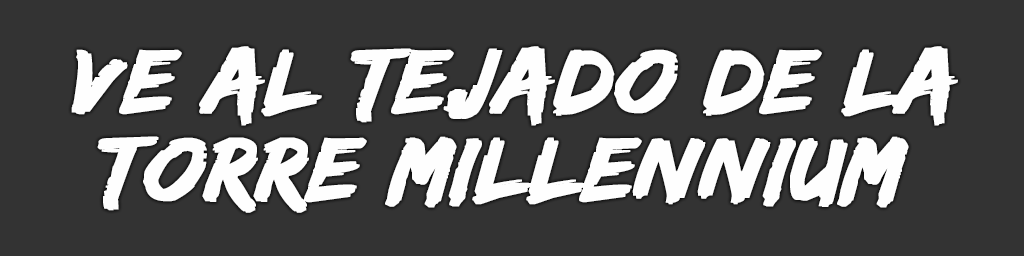
<style>
.page{position:relative;width:1024px;height:256px;background:#333333}
.page>*{position:absolute;margin:0}
.t1{font:94px/88px "EdoSZ";color:#fefefe;font-weight:bold;font-style:italic;scale:1.04 1}
</style>
<div class="page">
<p class="t1" style="left:71px;top:46px;width:887px;height:167px;text-align:center">ve aL TEJADO DE la<br>torre Millennium</p>
</div>
